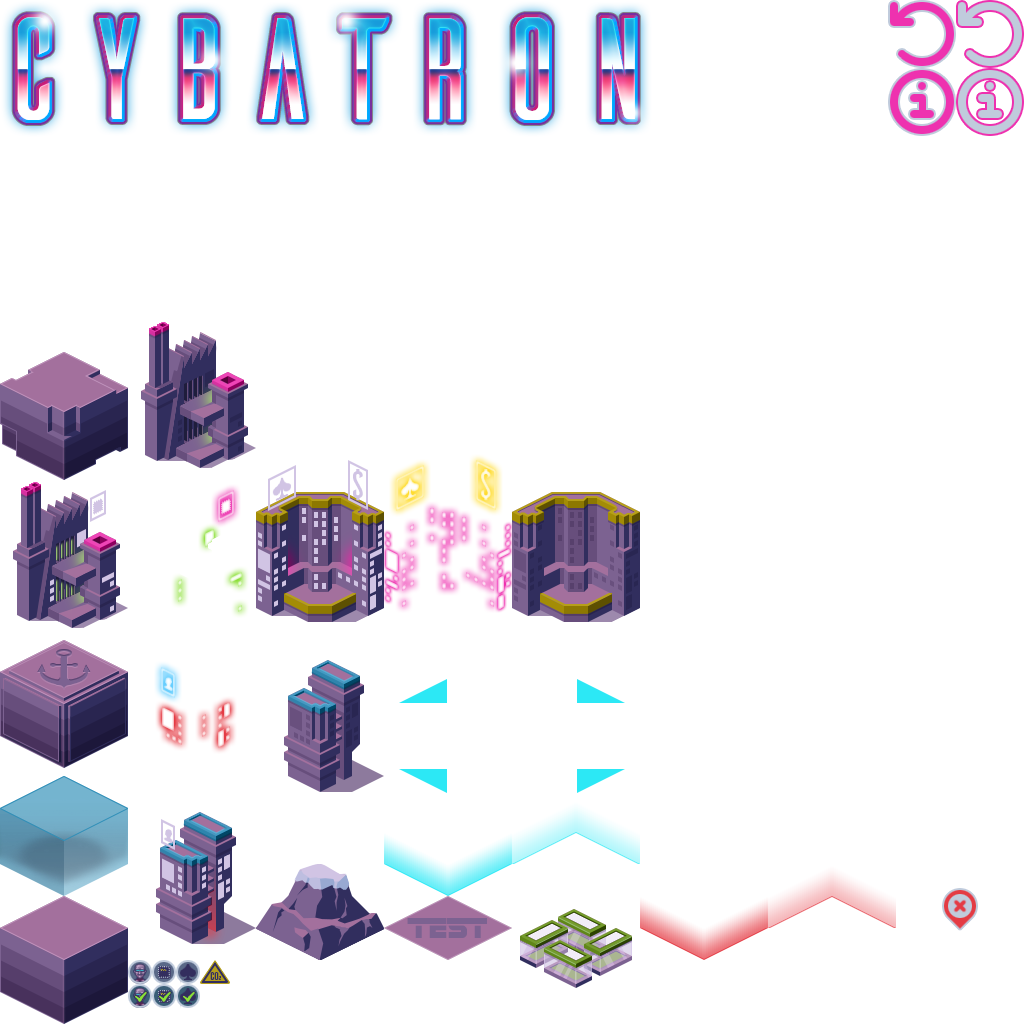
<style>
.page{position:relative;width:1024px;height:1024px;background:#ffffff}
.page>*{position:absolute;margin:0}
.t1{font:30px "SFSportsNightAltUpright";letter-spacing:0.01em;color:#7c6291;text-transform:uppercase}
.t2{font:10.4px "Ailerons-Regular";letter-spacing:-0.3em;color:#332e5e;text-transform:uppercase;scale:1.39 1}
.t3{font:10.4px "Ailerons-Regular";letter-spacing:-0.2em;color:#332e5e;text-transform:uppercase;scale:1.39 1}
.t4{font:4.2px "Ailerons-Regular";letter-spacing:-0.2em;color:#332e5e;text-transform:uppercase;scale:1.39 1}
</style>
<div class="page">
<p class="t1" style="left:407px;top:918px;width:80px;height:20px">test</p>
<p class="t2" style="left:210px;top:972px;width:11px;height:8px">C<span class="t3">O</span><span class="t4">2</span></p>
</div>
